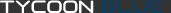
<style>
.page{position:relative;width:171px;height:13px;background:#333333}
.page>*{position:absolute;margin:0}
.t1{font:18px "Downlink";color:#ffffff}
.t2{font:18px "Downlink";color:#0b3d63}
</style>
<div class="page">
<p class="t1" style="left:0px;top:0px;width:164px;height:13px">TYCOON <span class="t2">BLUE</span></p>
</div>
